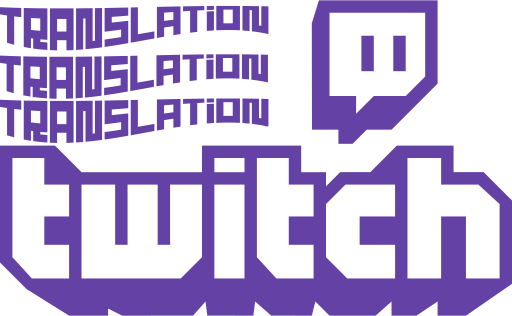
<style>
.page{position:relative;width:512px;height:316px;background:#ffffff}
.page>*{position:absolute;margin:0}
.t1{font:38.1px "Rust";color:#6441a4}
</style>
<div class="page">
<p class="t1" style="left:0px;top:5px;width:269px;height:46px">Translation</p>
<p class="t1" style="left:0px;top:54px;width:268px;height:45px">Translation</p>
<p class="t1" style="left:0px;top:98px;width:269px;height:45px">Translation</p>
</div>
